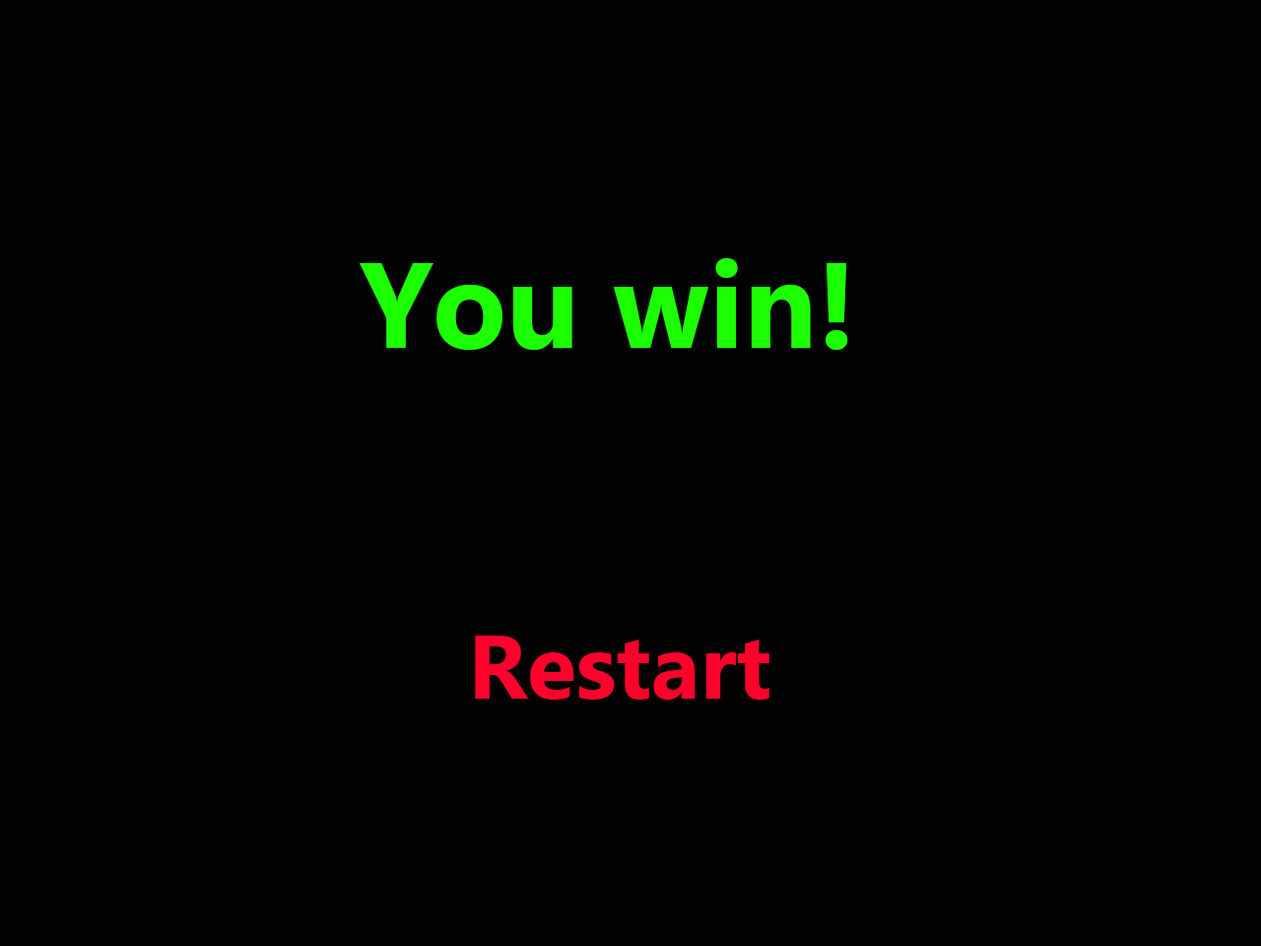
<style>
.page{position:relative;width:1261px;height:946px;background:#020202}
.page>*{position:absolute;margin:0}
.t1{font:120.8px "MicrosoftTaiLe-Bold";color:#1bff02}
</style>
<div class="page">
<p class="t1" style="left:360px;top:258px;width:488px;height:92px">You win!</p>
</div>
